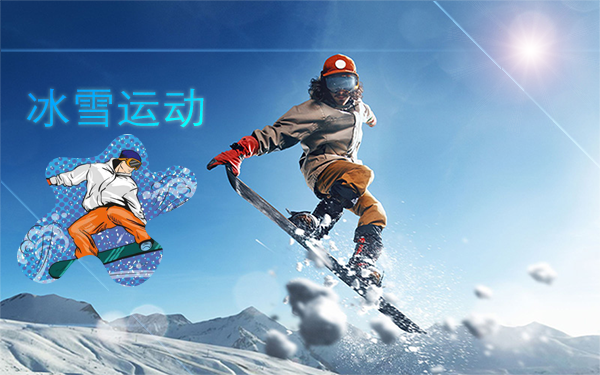
<style>
.page{position:relative;width:600px;height:375px}
.page>*{position:absolute;margin:0}
.t1{font:41.8px "DengXian";scale:1.09 1}
</style>
<div class="page">
<p class="t1" style="left:26px;top:88px;width:178px;height:40px">冰雪运动</p>
</div>
